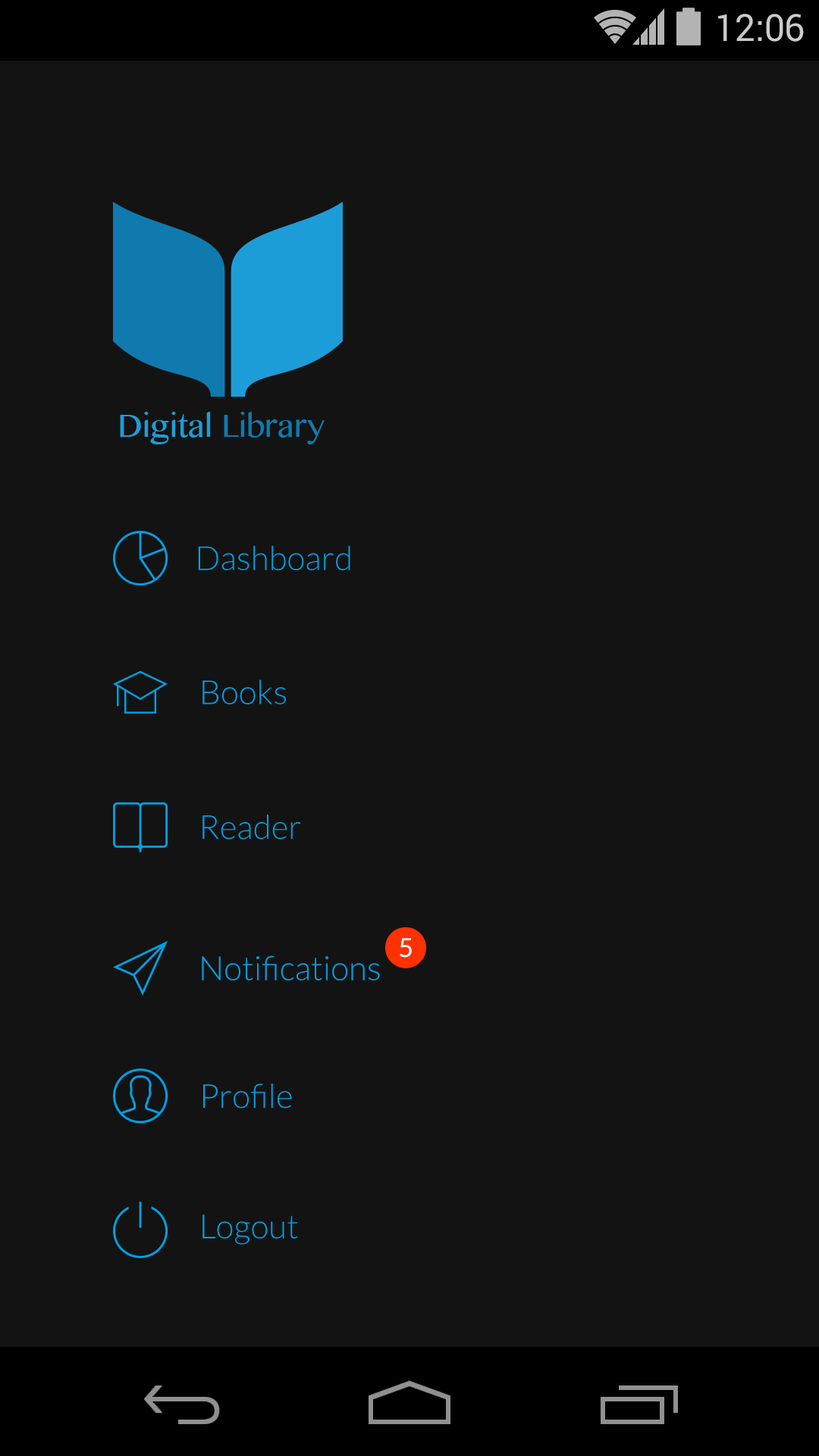
<style>
.page{position:relative;width:819px;height:1456px;background:#131313}
.page>*{position:absolute;margin:0}
.t1{font:37.4px "Roboto-Regular";color:#cbcbcb}
.t2{font:33.4px "Lato-Light";color:#009fe3}
.t3{font:26.2px "Lato-Regular";color:#ffffff}
</style>
<div class="page">
<p class="t1" style="left:718px;top:14px;width:86px;height:28px">12:06</p>
<p class="t2" style="left:198px;top:545px;width:152px;height:25px">Dashboard</p>
<p class="t2" style="left:202px;top:679px;width:84px;height:25px">Books</p>
<p class="t2" style="left:202px;top:814px;width:99px;height:25px">Reader</p>
<p class="t3" style="left:400px;top:938px;width:12px;height:20px">5</p>
<p class="t2" style="left:202px;top:955px;width:178px;height:26px">Notifications</p>
<p class="t2" style="left:203px;top:1084px;width:89px;height:25px">Profile</p>
<p class="t2" style="left:202px;top:1214px;width:96px;height:30px">Logout</p>
</div>
